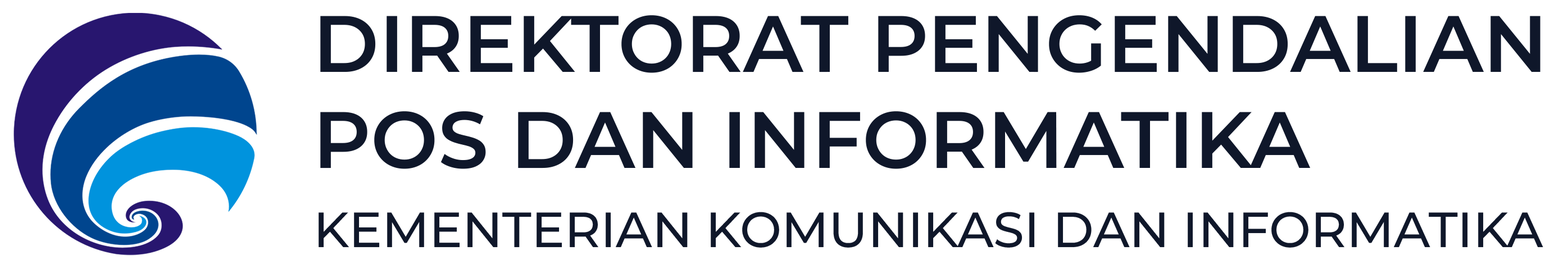
<style>
.page{position:relative;width:1568px;height:269px;background:#ffffff}
.page>*{position:absolute;margin:0}
.t1{font:79.8px "MontserratRoman-SemiBold";color:#0f172a}
.t2{font:49.4px "MontserratRoman-Medium";color:#0f172a}
</style>
<div class="page">
<p class="t1" style="left:320px;top:15px;width:1220px;height:154px">DIREKTORAT PENGENDALIAN<br>POS DAN INFORMATIKA</p>
<p class="t2" style="left:319px;top:212px;width:1224px;height:36px">KEMENTERIAN KOMUNIKASI DAN INFORMATIKA</p>
</div>
